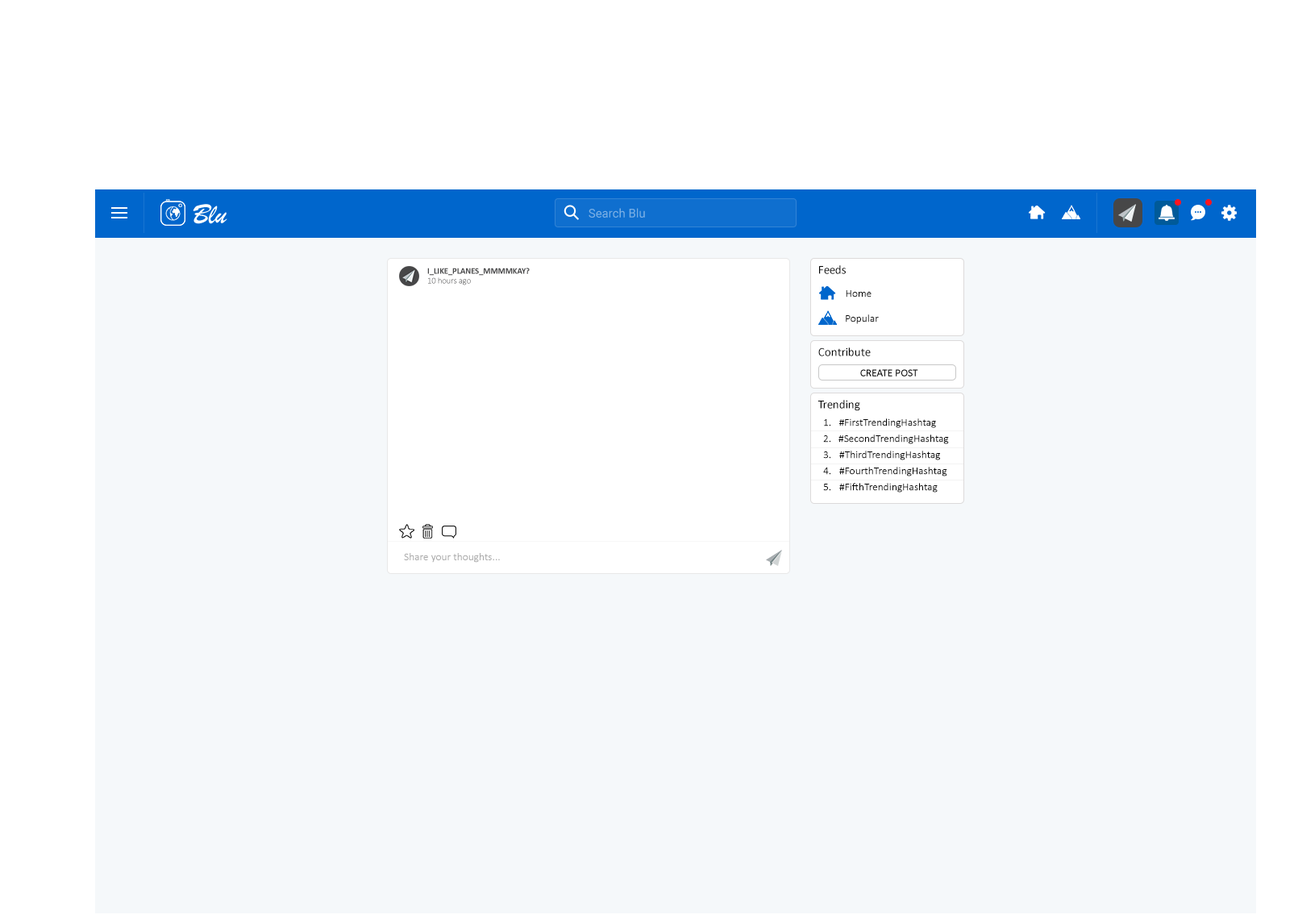
<style>
.page{position:relative;width:1298px;height:919px;background:#f5f8fa}
.page>*{position:absolute;margin:0}
.t1{font:12.1px "Roboto-Regular";color:#7bb0e5}
.t2{font:12.1px "Calibri";color:#030303}
.t3{font:10.7px "Calibri";color:#000000}
.t4{font:10.7px "Calibri";color:#a8a8a8}
</style>
<div class="page">
<p class="t1" style="left:588px;top:208px;width:57px;height:10px">Search Blu</p>
<p class="t2" style="left:819px;top:265px;width:27px;height:9px">Feeds</p>
<p class="t3" style="left:846px;top:290px;width:25px;height:7px">Home</p>
<p class="t3" style="left:846px;top:314px;width:33px;height:10px">Popular</p>
<p class="t2" style="left:818px;top:347px;width:53px;height:9px">Contribute</p>
<p class="t2" style="left:817px;top:400px;width:43px;height:11px">Trending</p>
<p class="t3" style="left:824px;top:419px;width:7px;height:7px">1.</p>
<p class="t3" style="left:839px;top:418px;width:97px;height:10px">#FirstTrendingHashtag</p>
<p class="t3" style="left:823px;top:435px;width:8px;height:8px">2.</p>
<p class="t3" style="left:838px;top:434px;width:111px;height:10px">#SecondTrendingHashtag</p>
<p class="t3" style="left:823px;top:451px;width:8px;height:8px">3.</p>
<p class="t3" style="left:839px;top:451px;width:101px;height:9px">#ThirdTrendingHashtag</p>
<p class="t3" style="left:823px;top:467px;width:8px;height:8px">4.</p>
<p class="t3" style="left:839px;top:467px;width:108px;height:9px">#FourthTrendingHashtag</p>
<p class="t3" style="left:823px;top:484px;width:8px;height:7px">5.</p>
<p class="t3" style="left:839px;top:483px;width:98px;height:9px">#FifthTrendingHashtag</p>
<p class="t4" style="left:404px;top:553px;width:96px;height:10px">Share your thoughts...</p>
</div>
